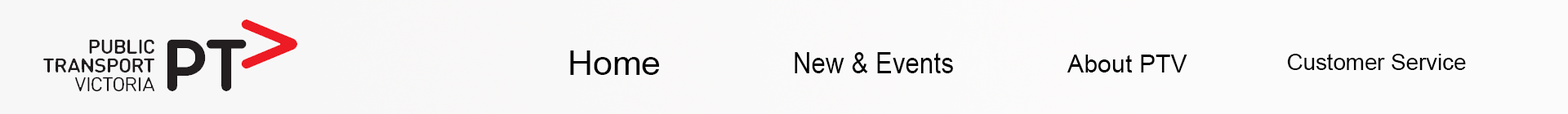
<style>
.page{position:relative;width:1568px;height:114px;background:#fcfbfb}
.page>*{position:absolute;margin:0}
.t1{font:33.7px "ArialMT";color:#000000;scale:1.04 1}
.t2{font:29.7px "ArialMT";color:#000000;scale:0.86 1}
.t3{font:22.8px "ArialMT";color:#000000}
.t4{font:24.2px "ArialMT";color:#000000}
</style>
<div class="page">
<p class="t1" style="left:570px;top:51px;width:89px;height:24px">Home</p>
<p class="t2" style="left:795px;top:52px;width:158px;height:22px">New &amp; Events</p>
<p class="t3" style="left:1287px;top:54px;width:179px;height:16px">Customer Service</p>
<p class="t4" style="left:1067px;top:55px;width:120px;height:18px">About PTV</p>
</div>
